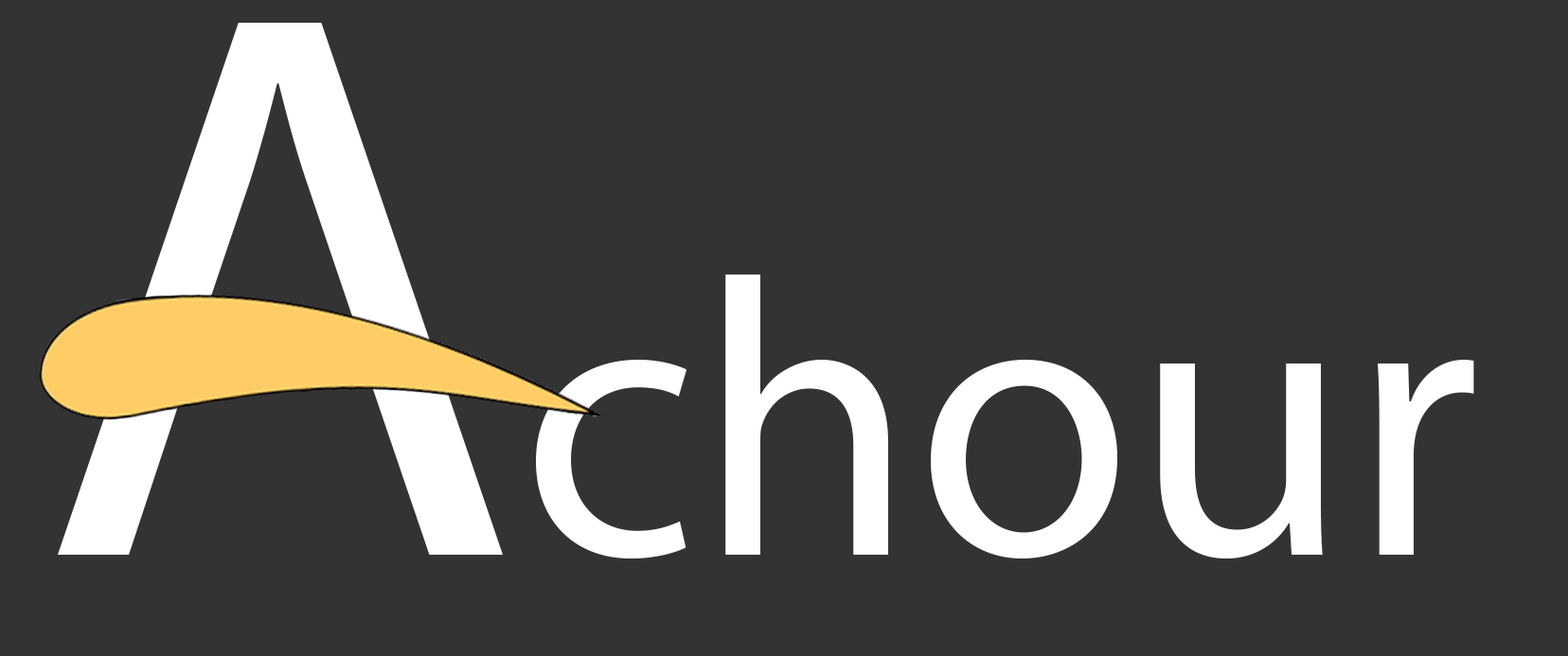
<style>
.page{position:relative;width:1568px;height:656px;background:#333333}
.page>*{position:absolute;margin:0}
.t1{font:394.5px "MyriadPro-Regular";color:#ffffff}
.t2{font:789px "MyriadPro-Regular";color:#ffffff}
</style>
<div class="page">
<p class="t1" style="left:58px;top:23px;width:1416px;height:537px"><span class="t2">A</span>chour</p>
</div>
